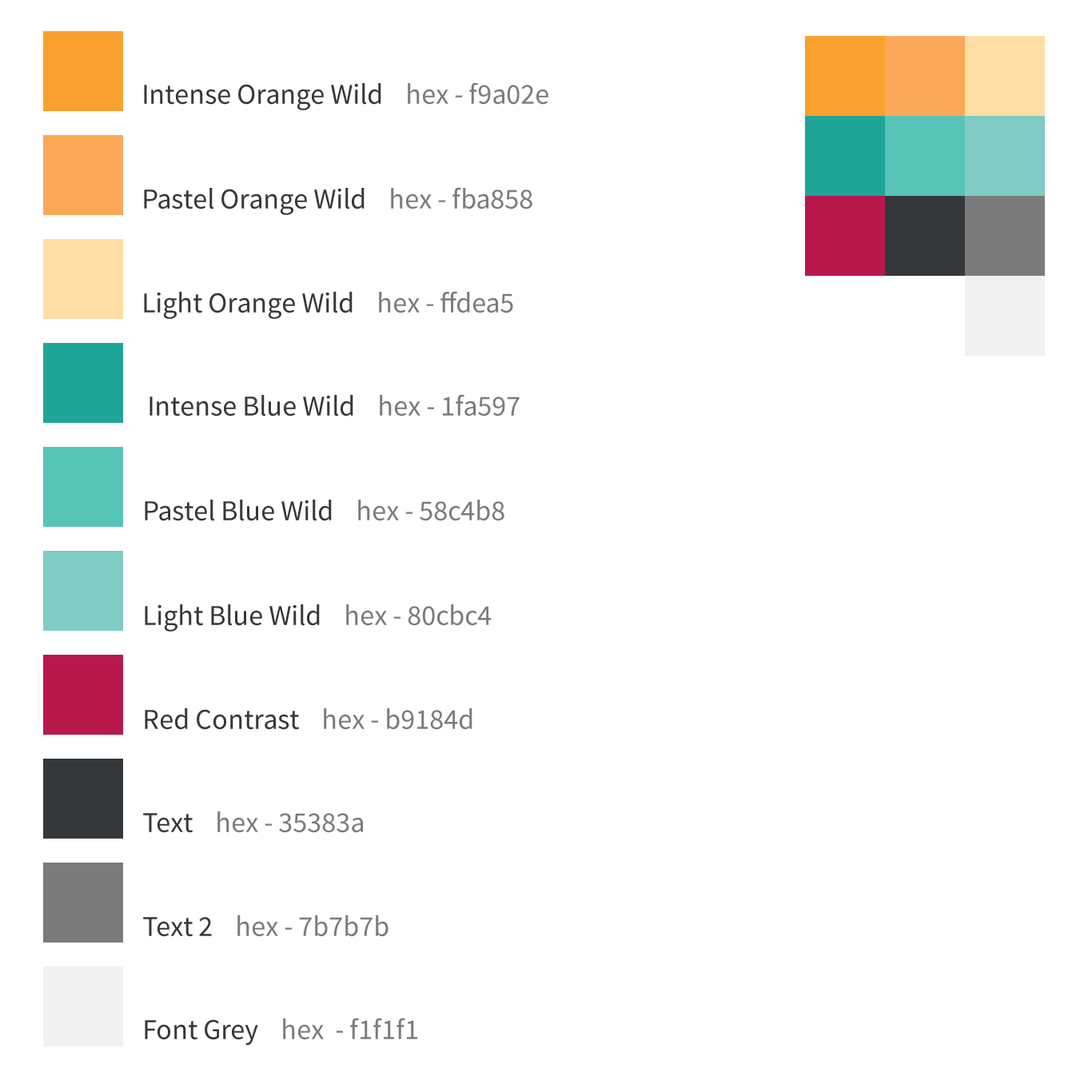
<style>
.page{position:relative;width:1092px;height:1092px;background:#ffffff}
.page>*{position:absolute;margin:0}
.t1{font:28.8px "SourceSansPro-Regular";color:#35383a}
.t2{font:28.8px "SourceSansPro-Regular";color:#7b7b7b}
</style>
<div class="page">
<p class="t1" style="left:144px;top:82px;width:404px;height:28px">Intense Orange Wild    <span class="t2">hex - f9a02e</span></p>
<p class="t1" style="left:144px;top:187px;width:388px;height:28px">Pastel Orange Wild    <span class="t2">hex - fba858</span></p>
<p class="t1" style="left:144px;top:291px;width:369px;height:28px">Light Orange Wild    <span class="t2">hex - ffdea5</span></p>
<p class="t1" style="left:149px;top:394px;width:371px;height:22px">Intense Blue Wild    <span class="t2">hex - 1fa597</span></p>
<p class="t1" style="left:145px;top:500px;width:359px;height:21px">Pastel Blue Wild    <span class="t2">hex - 58c4b8</span></p>
<p class="t1" style="left:145px;top:604px;width:347px;height:28px">Light Blue Wild    <span class="t2">hex - 80cbc4</span></p>
<p class="t1" style="left:145px;top:708px;width:327px;height:22px">Red Contrast    <span class="t2">hex - b9184d</span></p>
<p class="t2" style="left:143px;top:811px;width:220px;height:22px"><span class="t1">Text    </span>hex - 35383a</p>
<p class="t2" style="left:143px;top:915px;width:246px;height:22px"><span class="t1">Text 2    </span>hex - 7b7b7b</p>
<p class="t2" style="left:145px;top:1018px;width:272px;height:28px"><span class="t1">Font Grey    </span>hex  - f1f1f1</p>
</div>
